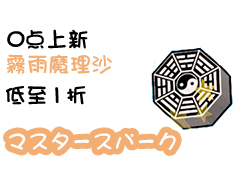
<style>
.page{position:relative;width:238px;height:180px;background:#ffffff}
.page>*{position:absolute;margin:0}
.t1{font:12.9px "DFMaruMoji-W9-WINP-RKSJ-H";color:#000000}
.t2{font:21.5px "DFMaruMoji-W9-WINP-RKSJ-H";color:#f3ae73}
.t3{font:21.5px "DFMaruMoji-W9-WINP-RKSJ-H";color:#feffff}
</style>
<div class="page">
<p class="t1" style="left:7px;top:29px;width:81px;height:20px">0点上新</p>
<p class="t2" style="left:6px;top:54px;width:106px;height:20px">霧雨魔理沙</p>
<p class="t1" style="left:6px;top:86px;width:80px;height:19px">低至1折</p>
<p class="t3" style="left:9px;top:132px;width:167px;height:18px">マスタースパーク</p>
</div>
